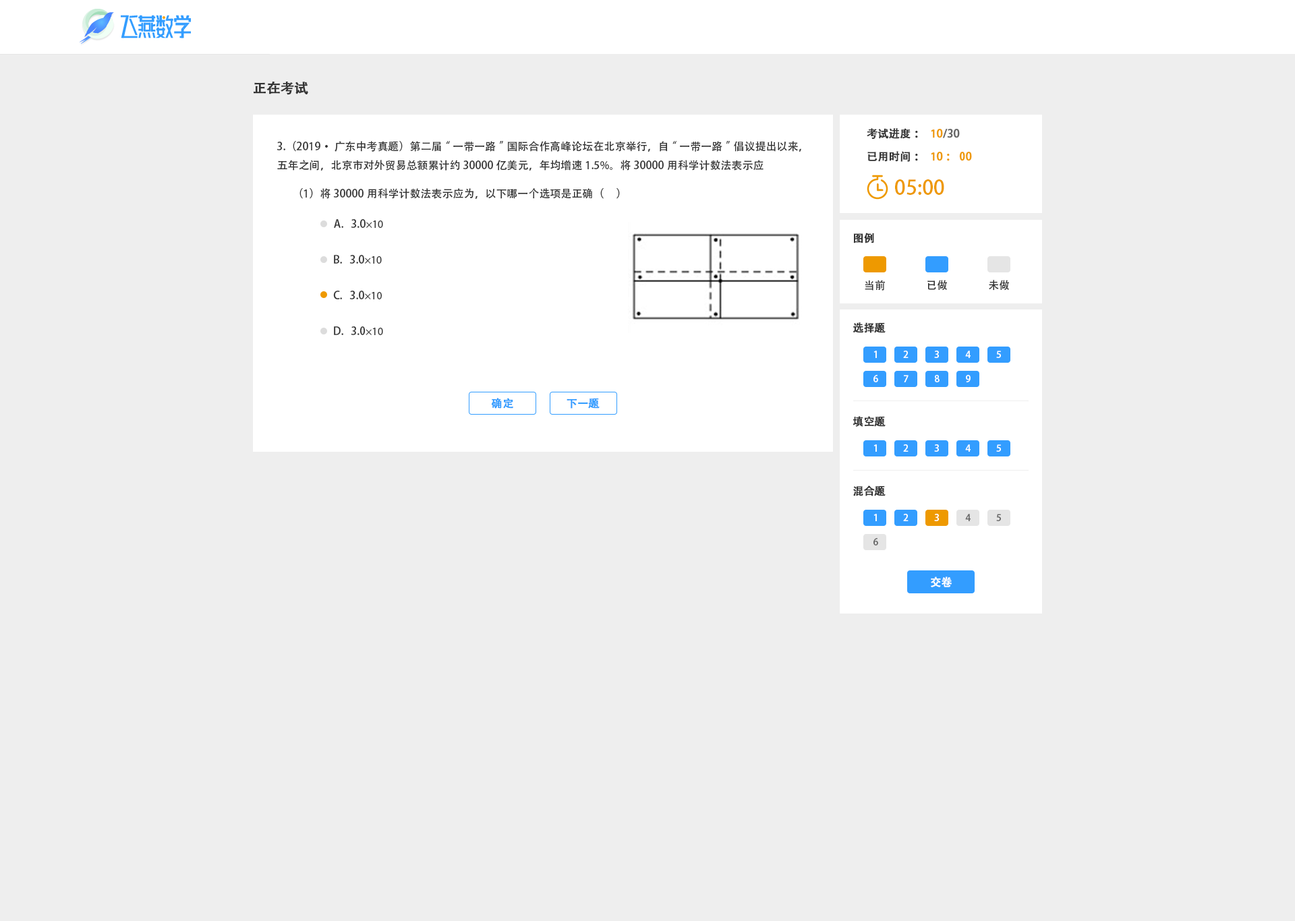
<style>
.page{position:relative;width:1295px;height:921px;background:#eeeeee}
.page>*{position:absolute;margin:0}
.t1{font:13.5px "AdobeHeitiStd-Regular";color:#333333;font-weight:bold}
.t2{font:10.8px "AdobeHeitiStd-Regular";color:#333333;font-weight:bold}
.t3{font:10.8px "AdobeHeitiStd-Regular";color:#666666;font-weight:bold}
.t4{font:10.8px "AdobeHeitiStd-Regular";color:#ee9900;font-weight:bold}
.t5{font:10.8px "AdobeHeitiStd-Regular";color:#333333}
.t6{font:20.2px "AdobeHeitiStd-Regular";color:#ee9900}
.t7{font:10.8px "MyriadPro-Regular";color:#333333}
.t8{font:9.4px "AdobeHeitiStd-Regular";color:#ffffff}
.t9{font:10.8px "AdobeHeitiStd-Regular";color:#339dff;font-weight:bold}
.t10{font:9.4px "AdobeHeitiStd-Regular";color:#666666}
.t11{font:10.8px "AdobeHeitiStd-Regular";color:#ffffff;font-weight:bold}
</style>
<div class="page">
<p class="t1" style="left:254px;top:81px;width:54px;height:14px">正在考试</p>
<p class="t2" style="left:866px;top:128px;width:52px;height:12px">考试进度：</p>
<p class="t3" style="left:931px;top:129px;width:29px;height:9px"><span class="t4">１0</span>/30</p>
<p class="t5" style="left:276px;top:141px;width:525px;height:30px">3.（2019·广东中考真题）第二届“一带一路”国际合作高峰论坛在北京举行，自“一带一路”倡议提出以来，五年之间，北京市对外贸易总额累计约30000亿美元，年均增速1.5%。将30000用科学计数法表示应</p>
<p class="t2" style="left:867px;top:151px;width:51px;height:11px">已用时间：</p>
<p class="t4" style="left:931px;top:152px;width:41px;height:9px">１0：00</p>
<p class="t6" style="left:895px;top:179px;width:49px;height:16px">05:00</p>
<p class="t5" style="left:299px;top:188px;width:321px;height:11px">（1）将30000用科学计数法表示应为，以下哪一个选项是正确（     ）</p>
<p class="t5" style="left:334px;top:219px;width:49px;height:9px">A.   3.0<span class="t7">×10</span></p>
<p class="t2" style="left:853px;top:233px;width:21px;height:10px">图例</p>
<p class="t5" style="left:334px;top:255px;width:48px;height:9px">B.   3.0<span class="t7">×10</span></p>
<p class="t5" style="left:864px;top:280px;width:21px;height:11px">当前</p>
<p class="t5" style="left:927px;top:280px;width:20px;height:11px">已做</p>
<p class="t5" style="left:988px;top:280px;width:21px;height:11px">未做</p>
<p class="t5" style="left:333px;top:291px;width:49px;height:8px">C.   3.0<span class="t7">×10</span></p>
<p class="t5" style="left:334px;top:326px;width:49px;height:9px">D.   3.0<span class="t7">×10</span></p>
<p class="t2" style="left:853px;top:322px;width:32px;height:11px">选择题</p>
<p class="t8" style="left:873px;top:351px;width:4px;height:7px">1</p>
<p class="t8" style="left:903px;top:351px;width:5px;height:7px">2</p>
<p class="t8" style="left:934px;top:351px;width:5px;height:7px">3</p>
<p class="t8" style="left:965px;top:351px;width:5px;height:7px">4</p>
<p class="t8" style="left:996px;top:351px;width:5px;height:7px">5</p>
<p class="t8" style="left:873px;top:375px;width:5px;height:7px">6</p>
<p class="t8" style="left:904px;top:375px;width:4px;height:7px">7</p>
<p class="t8" style="left:935px;top:375px;width:4px;height:7px">8</p>
<p class="t8" style="left:966px;top:375px;width:4px;height:7px">9</p>
<p class="t9" style="left:491px;top:398px;width:22px;height:11px">确定</p>
<p class="t9" style="left:566px;top:398px;width:33px;height:11px">下一题</p>
<p class="t2" style="left:852px;top:416px;width:33px;height:11px">填空题</p>
<p class="t8" style="left:873px;top:444px;width:4px;height:8px">1</p>
<p class="t8" style="left:903px;top:444px;width:5px;height:8px">2</p>
<p class="t8" style="left:934px;top:444px;width:5px;height:8px">3</p>
<p class="t8" style="left:965px;top:444px;width:5px;height:8px">4</p>
<p class="t8" style="left:996px;top:444px;width:5px;height:8px">5</p>
<p class="t2" style="left:853px;top:485px;width:32px;height:11px">混合题</p>
<p class="t8" style="left:873px;top:514px;width:4px;height:7px">1</p>
<p class="t8" style="left:903px;top:514px;width:5px;height:7px">2</p>
<p class="t8" style="left:934px;top:514px;width:5px;height:7px">3</p>
<p class="t10" style="left:965px;top:514px;width:5px;height:7px">4</p>
<p class="t10" style="left:996px;top:514px;width:5px;height:7px">5</p>
<p class="t10" style="left:873px;top:538px;width:5px;height:7px">6</p>
<p class="t11" style="left:931px;top:577px;width:21px;height:10px">交卷</p>
</div>
